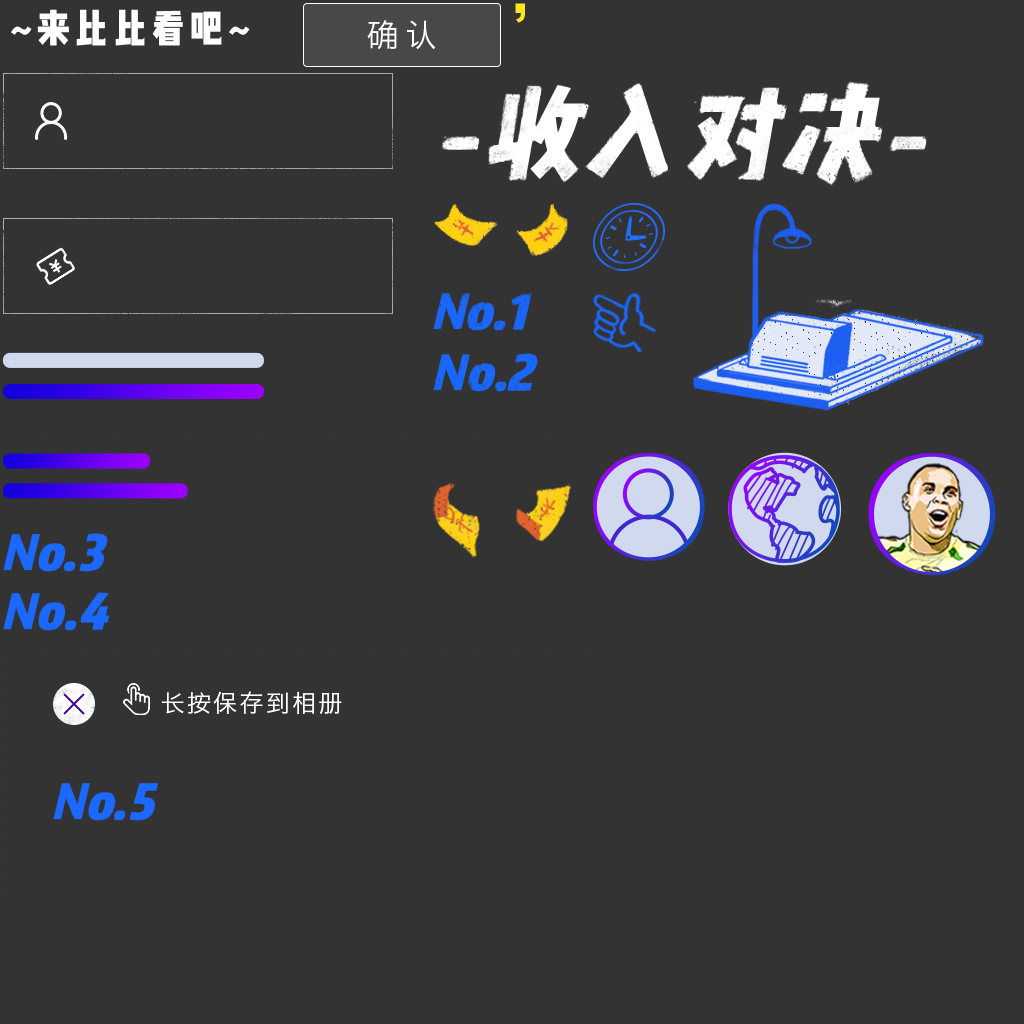
<style>
.page{position:relative;width:1024px;height:1024px;background:#333333}
.page>*{position:absolute;margin:0}
.t1{font:40px "WenYue-XinQingNianTi-NC-W8";letter-spacing:0.14em;color:#ffffff;text-transform:uppercase;scale:0.95 1}
.t2{font:32px "HiraginoSansGB-W3";letter-spacing:0.2em;color:#ffffff;text-transform:uppercase}
.t3{font:105.5px "WenYue-XinQingNianTi-NC-W8";letter-spacing:0.1em;color:#ffffff;text-transform:uppercase}
.t4{font:49.6px "WenYue-XinQingNianTi-NC-W8";letter-spacing:0.01em;color:#186fff;font-weight:bold}
.t5{font:49.6px "WenYue-XinQingNianTi-NC-W8";letter-spacing:0.01em;color:#186fff;text-transform:uppercase}
.t6{font:49.6px "WenYue-XinQingNianTi-NC-W8";letter-spacing:0.01em;color:#1a70ff;font-weight:bold}
.t7{font:49.6px "WenYue-XinQingNianTi-NC-W8";letter-spacing:0.01em;color:#1a70ff;text-transform:uppercase}
.t8{font:24px "HiraginoSansGB-W3";letter-spacing:0.1em;color:#ffffff;text-transform:uppercase}
</style>
<div class="page">
<p class="t1" style="left:11px;top:9px;width:239px;height:37px">~来比比看吧~</p>
<p class="t2" style="left:367px;top:20px;width:69px;height:30px">确认</p>
<p class="t3" style="left:441px;top:85px;width:487px;height:95px">-收入对决-</p>
<p class="t4" style="left:433px;top:293px;width:99px;height:38px"><span class="t5">n</span>o.1</p>
<p class="t4" style="left:433px;top:353px;width:105px;height:39px"><span class="t5">n</span>o.2</p>
<p class="t6" style="left:3px;top:533px;width:105px;height:39px"><span class="t7">n</span>o.3</p>
<p class="t6" style="left:3px;top:592px;width:107px;height:39px"><span class="t7">n</span>o.4</p>
<p class="t8" style="left:161px;top:691px;width:181px;height:24px">长按保存到相册</p>
<p class="t6" style="left:53px;top:783px;width:105px;height:38px"><span class="t7">n</span>o.5</p>
</div>
